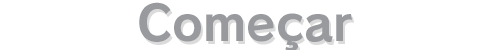
<style>
.page{position:relative;width:490px;height:50px;background:#ffffff}
.page>*{position:absolute;margin:0}
.t1{font:48px "RodinPro-B";color:#989a9d}
</style>
<div class="page">
<p class="t1" style="left:139px;top:2px;width:213px;height:49px">Começar</p>
</div>
